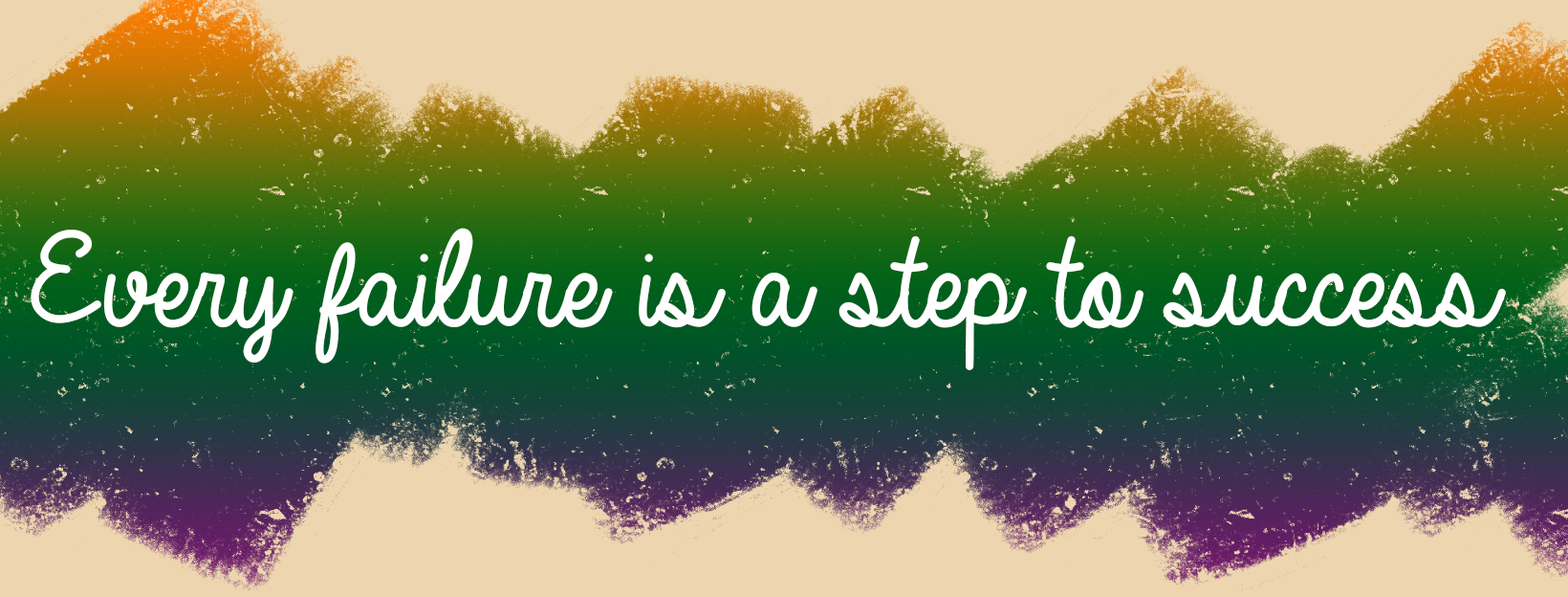
<style>
.page{position:relative;width:1568px;height:597px;background:#edd6af}
.page>*{position:absolute;margin:0}
.t1{font:143.4px "AlwaysInMyHeart";color:#ffffff}
</style>
<div class="page">
<p class="t1" style="left:31px;top:228px;width:1475px;height:142px">Every failure is a step to success</p>
</div>
